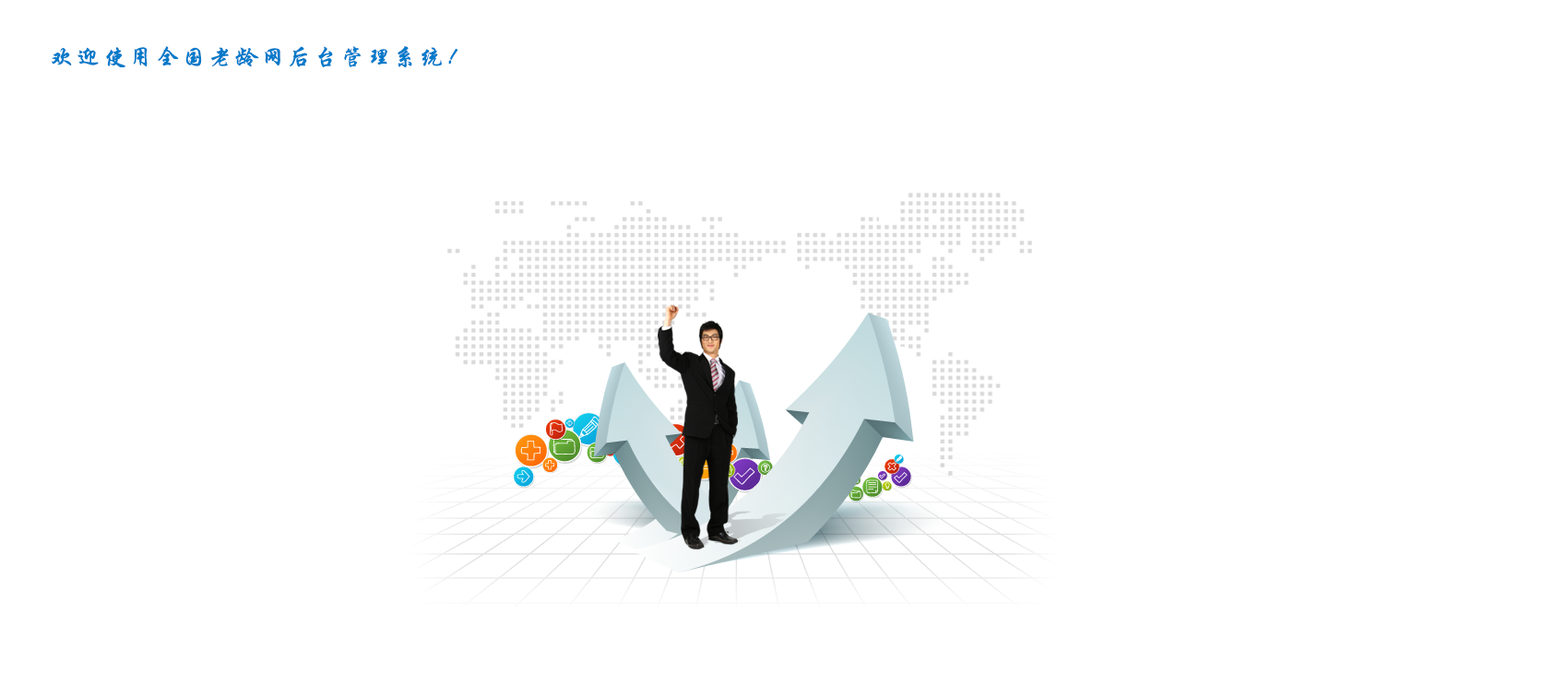
<style>
.page{position:relative;width:1568px;height:673px;background:#ffffff}
.page>*{position:absolute;margin:0}
.t1{font:24px "STXingkai";letter-spacing:0.1em;color:#007aca}
</style>
<div class="page">
<p class="t1" style="left:51px;top:46px;width:407px;height:22px">欢迎使用全国老龄网后台管理系统！</p>
</div>
